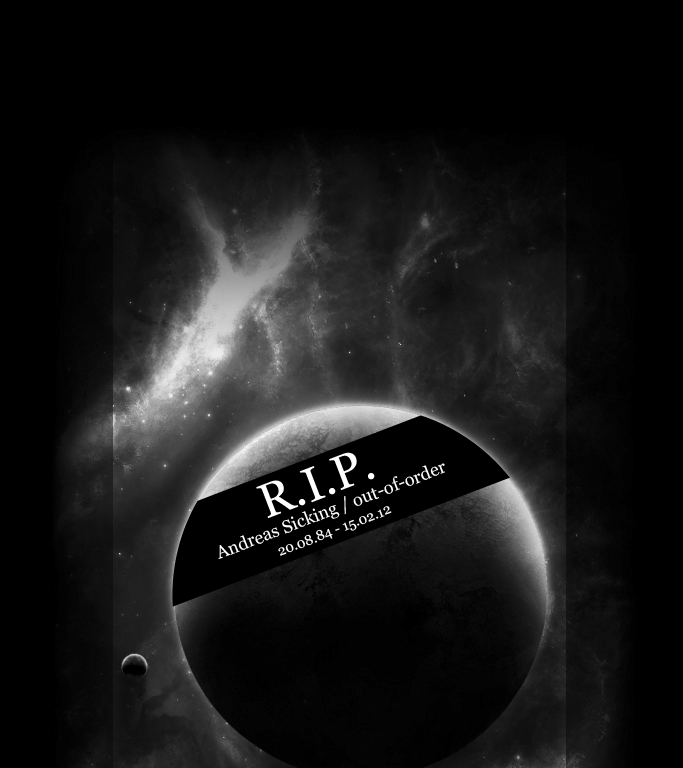
<style>
.page{position:relative;width:683px;height:768px;background:#000000}
.page>*{position:absolute;margin:0}
.t1{font:48px "Vani";color:#ffffff}
.t2{font:18px "Vani";color:#ffffff}
.t3{font:14px "Vani";color:#ffffff}
</style>
<div class="page">
<p class="t1" style="left:256px;top:452px;width:119px;height:67px;rotate:-21deg">R.I.P.</p>
<p class="t2" style="left:218px;top:463px;width:227px;height:96px;rotate:-21deg">Andreas Sicking / out-of-order</p>
<p class="t3" style="left:278px;top:506px;width:114px;height:50px;rotate:-21deg">20.08.84 - 15.02.12</p>
</div>
